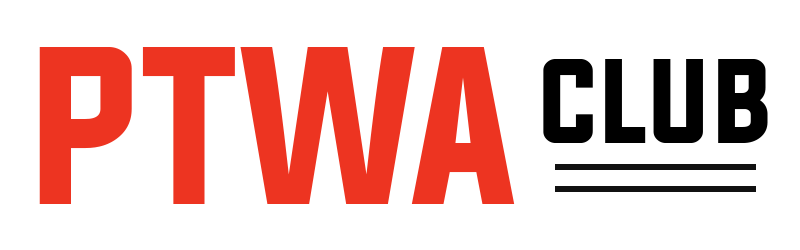
<style>
.page{position:relative;width:800px;height:250px;background:#ffffff}
.page>*{position:absolute;margin:0}
.t1{font:189.7px "Evogria";letter-spacing:0.02em;color:#ee3522}
.t2{font:102.2px "Evogria";letter-spacing:0.02em;color:#000000}
</style>
<div class="page">
<p class="t1" style="left:39px;top:47px;width:476px;height:157px">PTWA</p>
<p class="t2" style="left:543px;top:59px;width:225px;height:84px">CLUB</p>
</div>
